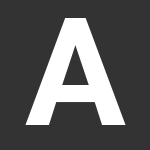
<style>
.page{position:relative;width:150px;height:150px;background:#333333}
.page>*{position:absolute;margin:0}
.t1{font:150px "Roboto-Bold";color:#ffffff}
</style>
<div class="page">
<p class="t1" style="left:25px;top:18px;width:101px;height:107px">A</p>
</div>
